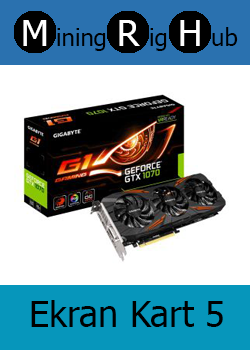
<style>
.page{position:relative;width:250px;height:350px;background:#ffffff}
.page>*{position:absolute;margin:0}
.t1{font:36px "Tahoma";color:#ffffff}
.t2{font:24px "Tahoma";color:#000000}
.t3{font:36px "Tahoma";color:#000000}
</style>
<div class="page">
<p class="t1" style="left:23px;top:20px;width:24px;height:26px">M</p>
<p class="t2" style="left:57px;top:28px;width:49px;height:23px">ining</p>
<p class="t1" style="left:119px;top:20px;width:21px;height:26px">R</p>
<p class="t2" style="left:150px;top:28px;width:17px;height:23px">ig</p>
<p class="t1" style="left:180px;top:20px;width:20px;height:26px">H</p>
<p class="t2" style="left:212px;top:27px;width:26px;height:19px">ub</p>
<p class="t3" style="left:31px;top:300px;width:192px;height:27px">Ekran Kart 5</p>
</div>
